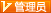
<style>
.page{position:relative;width:51px;height:13px}
.page>*{position:absolute;margin:0}
.t1{font:10.6px "MicrosoftYaHei";color:#ffffff}
</style>
<div class="page">
<p class="t1" style="left:14px;top:1px;width:33px;height:11px">管理员</p>
</div>
